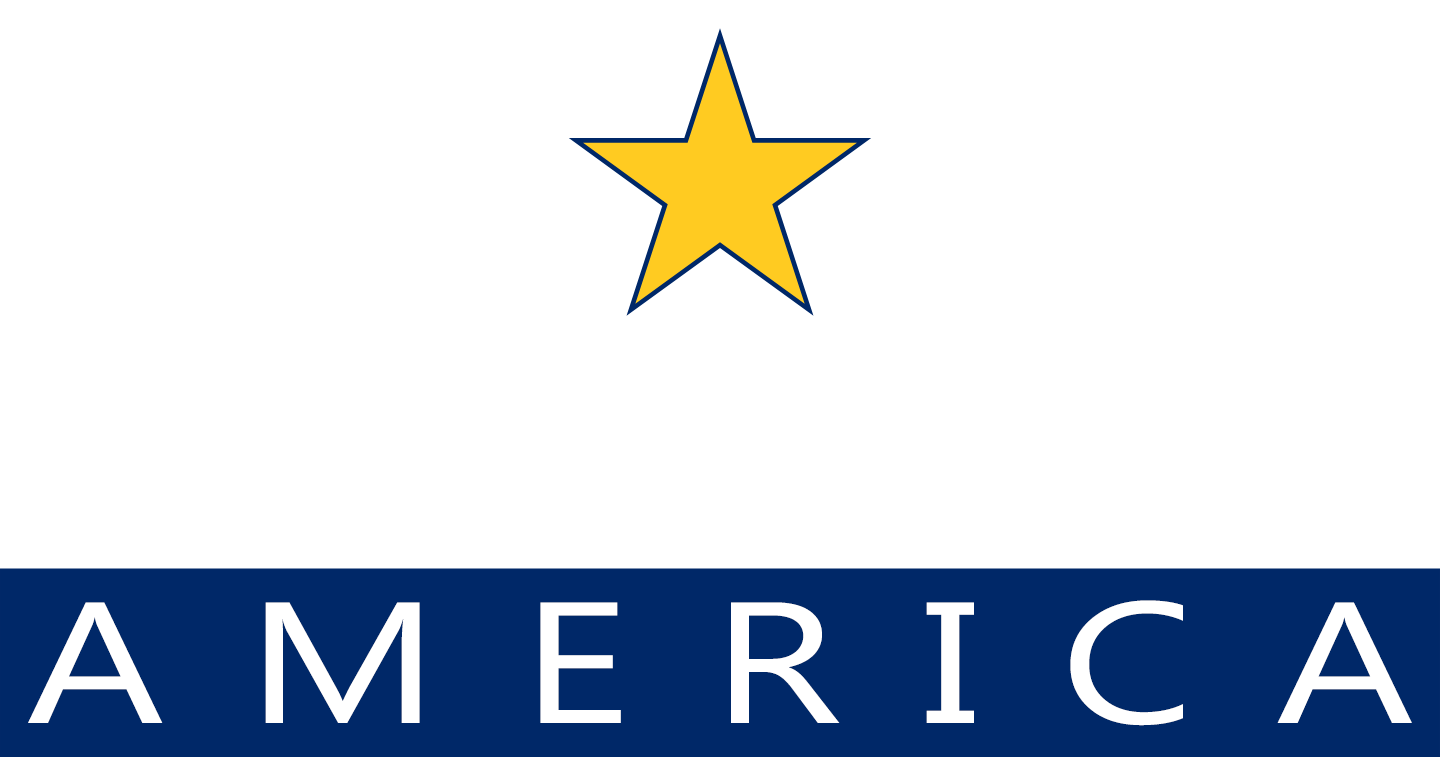
<style>
.page{position:relative;width:1440px;height:757px;background:#ffffff}
.page>*{position:absolute;margin:0}
.t1{font:172px "MicrosoftTaiLe";letter-spacing:0.38em;color:#ffffff;scale:1.25 1}
</style>
<div class="page">
<p class="t1" style="left:28px;top:600px;width:1384px;height:126px">AMERICA</p>
</div>
